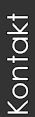
<style>
.page{position:relative;width:35px;height:117px;background:#333333}
.page>*{position:absolute;margin:0}
.t1{font:28px "CenturyGothic";color:#ffffff}
</style>
<div class="page">
<p class="t1" style="left:7px;top:13px;width:22px;height:101px;rotate:-90deg">Kontakt</p>
</div>
